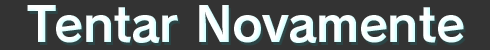
<style>
.page{position:relative;width:490px;height:50px;background:#333333}
.page>*{position:absolute;margin:0}
.t1{font:48px "RodinPro-B";letter-spacing:-0.016em;color:#feffff}
</style>
<div class="page">
<p class="t1" style="left:27px;top:5px;width:437px;height:38px">Tentar Novamente</p>
</div>
